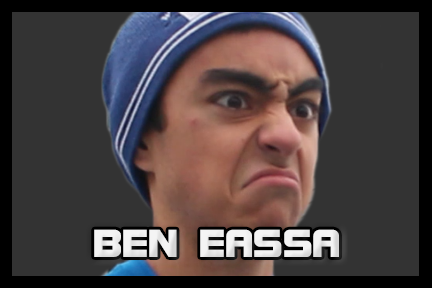
<style>
.page{position:relative;width:432px;height:288px;background:#333333}
.page>*{position:absolute;margin:0}
.t1{font:41.7px "BolsterBold";color:#f3f3f3}
</style>
<div class="page">
<p class="t1" style="left:94px;top:229px;width:245px;height:28px">BEN EASSA</p>
</div>
